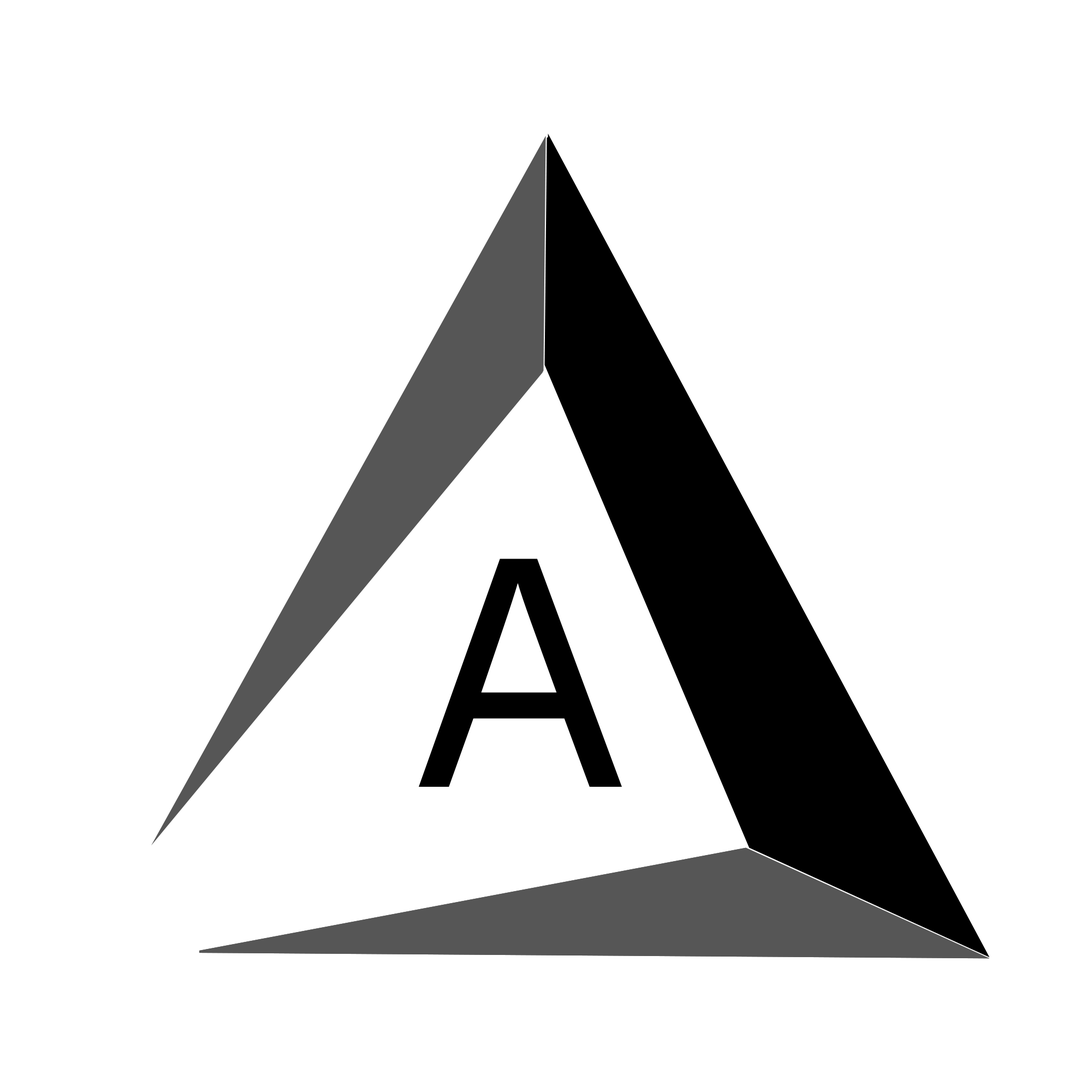
<style>
.page{position:relative;width:1092px;height:1092px;background:#ffffff}
.page>*{position:absolute;margin:0}
.t1{font:327.6px "AcuminConcept-Regular";color:#000000}
</style>
<div class="page">
<p class="t1" style="left:418px;top:559px;width:204px;height:228px">A</p>
</div>
